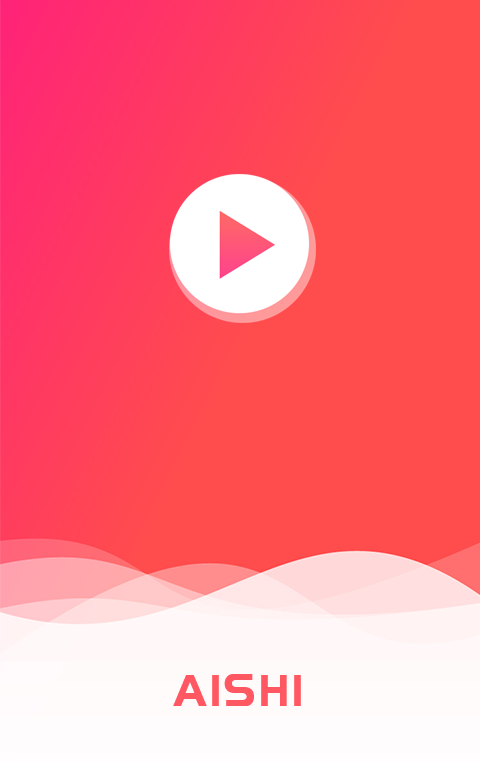
<style>
.page{position:relative;width:480px;height:762px;background:#ff4d4d}
.page>*{position:absolute;margin:0}
.t1{font:46.7px "PangMenZhengDao";letter-spacing:0.04em;color:#ff5862}
</style>
<div class="page">
<p class="t1" style="left:173px;top:674px;width:128px;height:32px">AISHI</p>
</div>
